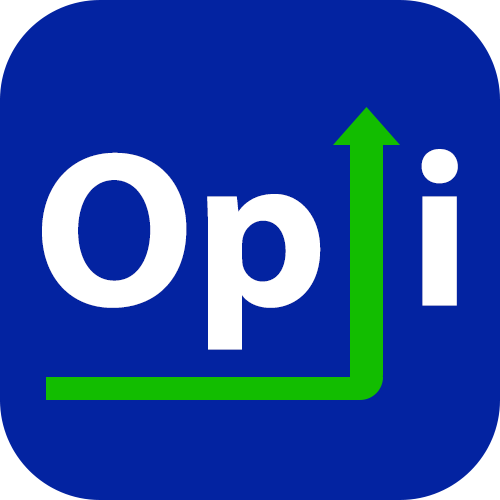
<style>
.page{position:relative;width:500px;height:500px;background:#0323a1}
.page>*{position:absolute;margin:0}
.t1{font:222.3px "MyriadPro-Bold";color:#ffffff}
</style>
<div class="page">
<p class="t1" style="left:42px;top:149px;width:416px;height:201px">Opti</p>
</div>
